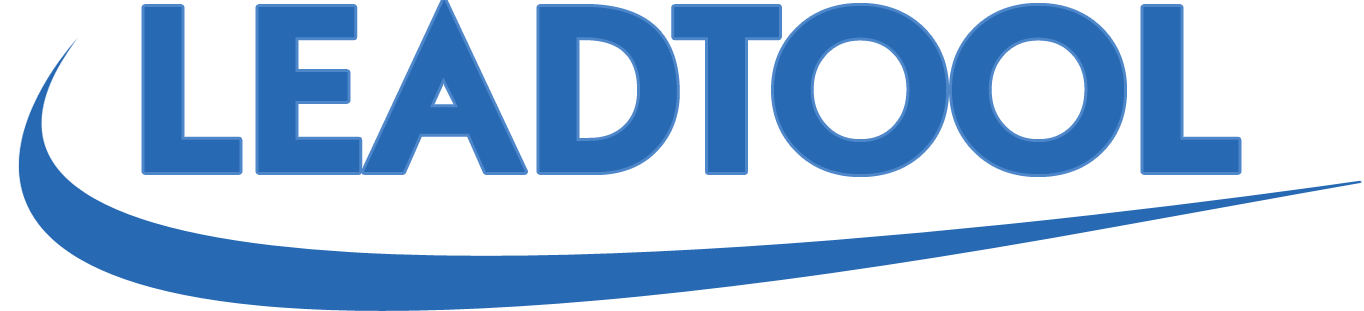
<style>
.page{position:relative;width:1364px;height:311px;background:#ffffff}
.page>*{position:absolute;margin:0}
.t1{font:208.3px "NobelDtlBold";letter-spacing:-0.05em;color:#2769b3;text-transform:uppercase}
</style>
<div class="page">
<p class="t1" style="left:144px;top:0px;width:1095px;height:174px">Leadtool</p>
</div>
